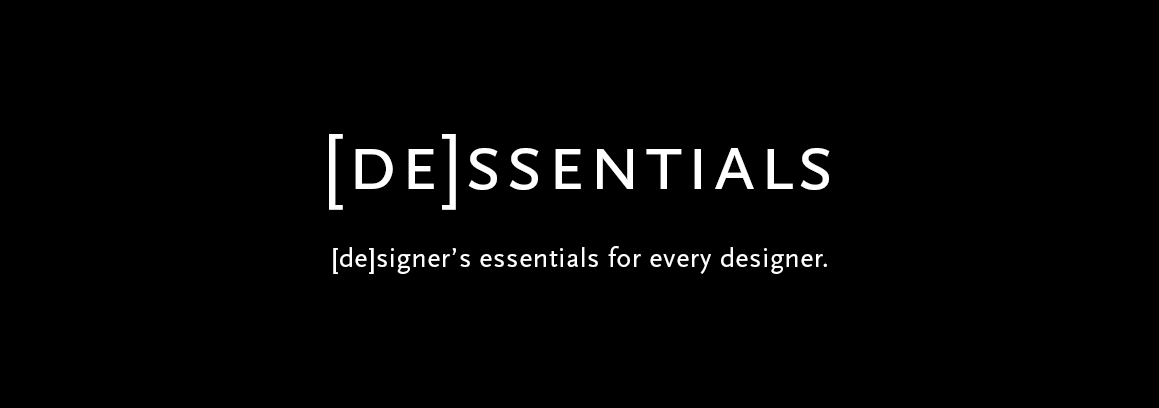
<style>
.page{position:relative;width:1159px;height:408px;background:#000000}
.page>*{position:absolute;margin:0}
.t1{font:83.3px "ScalaSans-Caps";letter-spacing:0.025em;color:#ffffff}
.t2{font:27.8px "ScalaSans-Regular";letter-spacing:0.025em;color:#ffffff}
</style>
<div class="page">
<p class="t1" style="left:329px;top:134px;width:501px;height:76px">[de]ssentials</p>
<p class="t2" style="left:333px;top:246px;width:494px;height:28px">[de]signer’s essentials for every designer.</p>
</div>
